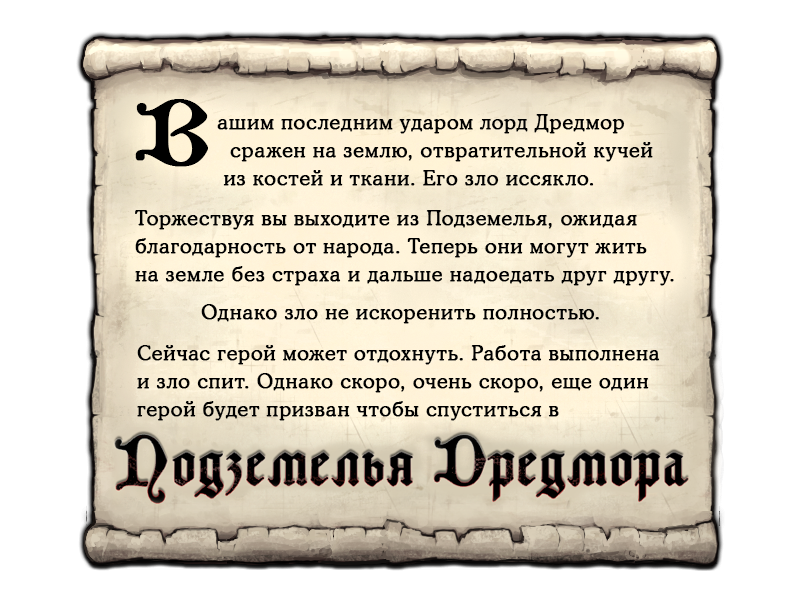
<style>
.page{position:relative;width:800px;height:600px;background:#ffffff}
.page>*{position:absolute;margin:0}
.t1{font:93.6px "LombardinaTwo";letter-spacing:0.03em;color:#000000;font-weight:bold}
.t2{font:20px/28px "CooperLightCBT";letter-spacing:0.03em;color:#000000;font-weight:bold}
.t3{font:20px "CooperLightCBT";letter-spacing:0.03em;color:#000000;font-weight:bold}
</style>
<div class="page">
<p class="t1" style="left:135px;top:99px;width:73px;height:68px">В</p>
<p class="t2" style="left:217px;top:114px;width:436px;height:72px">ашим последним ударом лорд Дредмор <br>  сражен на землю, отвратительной кучей <br> из костей и ткани. Его зло иссякло.</p>
<p class="t2" style="left:135px;top:210px;width:539px;height:76px">Торжествуя вы выходите из Подземелья, ожидая<br>благодарность от народа. Теперь они могут жить <br>на земле без страха и дальше надоедать друг другу.</p>
<p class="t3" style="left:201px;top:304px;width:398px;height:20px">Однако зло не искоренить полностью.</p>
<p class="t2" style="left:137px;top:345px;width:523px;height:76px">Сейчас герой может отдохнуть. Работа выполнена <br>и зло спит. Однако скоро, очень скоро, еще один <br>герой будет призван чтобы спуститься в</p>
</div>
